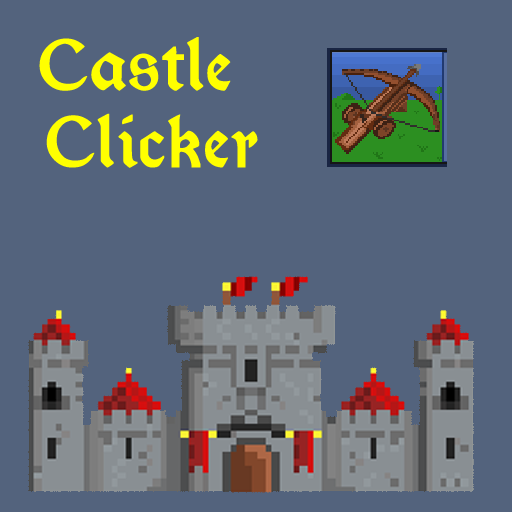
<style>
.page{position:relative;width:512px;height:512px;background:#53637d}
.page>*{position:absolute;margin:0}
.t1{font:64px "Kelmscott-Regular";color:#ffff00;font-weight:bold}
</style>
<div class="page">
<p class="t1" style="left:39px;top:37px;width:219px;height:131px;text-align:center">Castle <br>Clicker</p>
</div>
